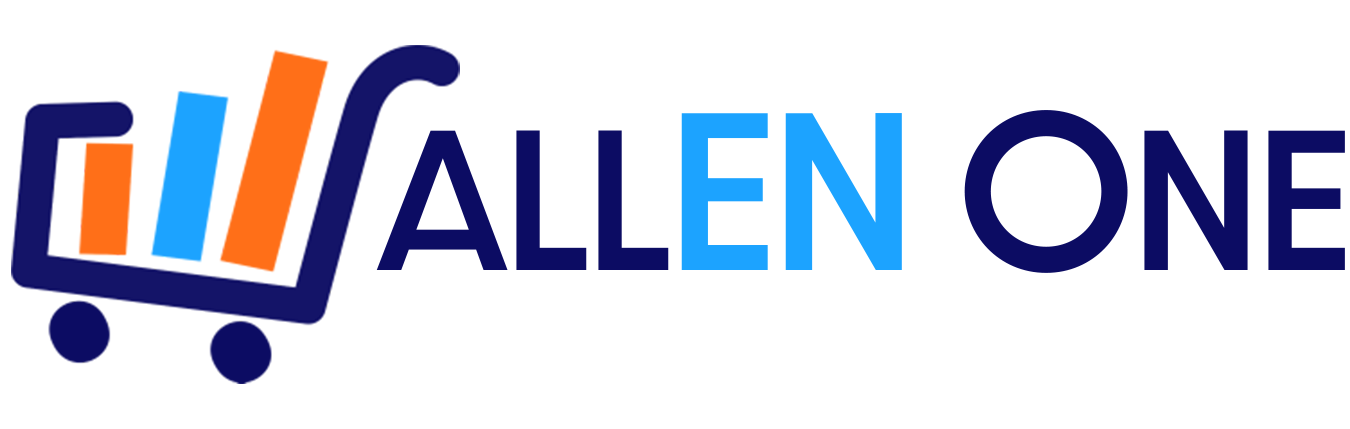
<style>
.page{position:relative;width:1350px;height:429px;background:#ffffff}
.page>*{position:absolute;margin:0}
.t1{font:169.2px "DazzleUnicase-Medium";color:#0c0c63}
.t2{font:190.4px "DazzleUnicase-Medium";color:#1ca3ff}
.t3{font:190.4px "DazzleUnicase-Medium";color:#0c0c63}
</style>
<div class="page">
<p class="t1" style="left:376px;top:110px;width:969px;height:163px">ALL<span class="t2">EN </span><span class="t3">O</span>NE</p>
</div>
